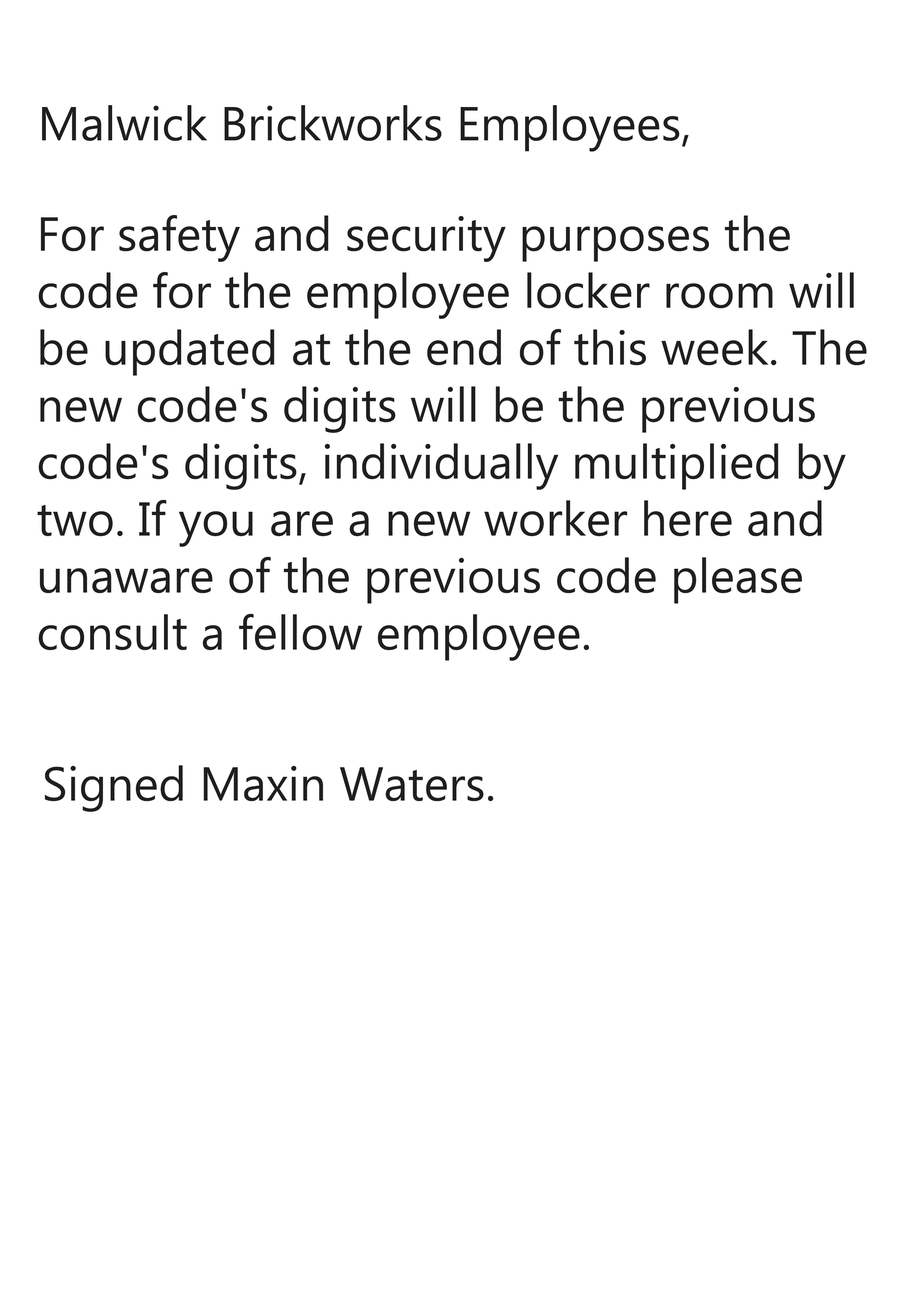
<style>
.page{position:relative;width:918px;height:1299px;background:#ffffff}
.page>*{position:absolute;margin:0}
.t1{font:47.5px "MicrosoftPhagsPa";color:#1f1f1f}
</style>
<div class="page">
<p class="t1" style="left:42px;top:105px;width:647px;height:47px">Malwick Brickworks Employees,</p>
<p class="t1" style="left:37px;top:215px;width:830px;height:446px">For safety and security purposes the <br>code for the employee locker room will<br>be updated at the end of this week. The<br>new code's digits will be the previous<br>code's digits, individually multiplied by<br>two. If you are a new worker here and<br>unaware of the previous code please<br>consult a fellow employee.</p>
<p class="t1" style="left:45px;top:765px;width:449px;height:47px">Signed Maxin Waters.</p>
</div>
